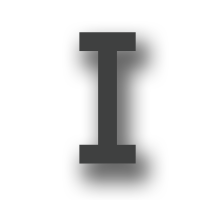
<style>
.page{position:relative;width:215px;height:200px;background:#ffffff}
.page>*{position:absolute;margin:0}
.t1{font:150px "Manteka";color:#3f4040}
</style>
<div class="page">
<p class="t1" style="left:79px;top:32px;width:57px;height:132px">I</p>
</div>
